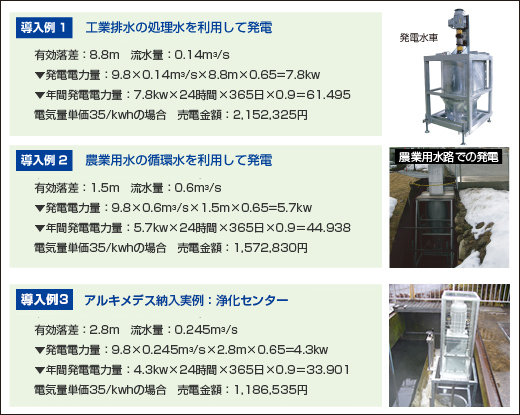
<style>
.page{position:relative;width:520px;height:415px;background:#ebf4e3}
.page>*{position:absolute;margin:0}
.t1{font:11px/20px "ShinGoPro-Regular";color:#333333}
.t2{font:6px/20px "ShinGoPro-Regular";color:#333333}
.t3{font:12px "ShinGoPro-Bold";letter-spacing:0.05em;color:#ffffff}
.t4{font:12px "ShinGoPro-Medium";color:#014199}
</style>
<div class="page">
<p class="t1" style="left:34px;top:49px;width:317px;height:71px">有効落差：8.8m　流水量：0.14m<span class="t2">3</span>/s<br>▼発電電力量：9.8×0.14m<span class="t2">3</span>/s×8.8m×0.65=7.8kw<br>▼年間発電電力量：7.8kw×24時間×365日×0.9＝61.495<br>電気量単価35/kwhの場合　売電金額：2,152,325円</p>
<p class="t1" style="left:34px;top:182px;width:317px;height:71px">有効落差：1.5m　流水量：0.6m<span class="t2">3</span>/s<br>▼発電電力量：9.8×0.6m<span class="t2">3</span>/s×1.5m×0.65=5.7kw<br>▼年間発電電力量：5.7kw×24時間×365日×0.9＝44.938<br>電気量単価35/kwhの場合　売電金額：1,572,830円</p>
<p class="t3" style="left:21px;top:293px;width:47px;height:13px">導入例3</p>
<p class="t4" style="left:84px;top:294px;width:204px;height:13px">アルキメデス納入実例：浄化センター</p>
<p class="t1" style="left:34px;top:324px;width:314px;height:71px">有効落差：2.8m　流水量：0.245m<span class="t2">3</span>/s<br>▼発電電力量：9.8×0.245m<span class="t2">3</span>/s×2.8m×0.65=4.3kw<br>▼年間発電電力量：4.3kw×24時間×365日×0.9＝33.901<br>電気量単価35/kwhの場合　売電金額：1,186,535円</p>
</div>
